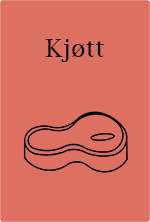
<style>
.page{position:relative;width:150px;height:222px;background:#de7061}
.page>*{position:absolute;margin:0}
.t1{font:24px "LucidaBright";color:#000000}
.t2{font:36px "LucidaBright";color:#000000}
</style>
<div class="page">
<p class="t1" style="left:46px;top:39px;width:58px;height:23px"><span class="t2"><br></span>Kjøtt</p>
</div>
